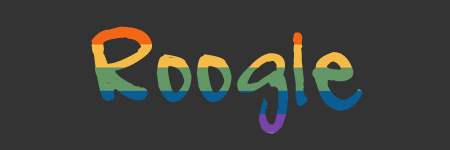
<style>
.page{position:relative;width:450px;height:150px;background:#333333}
.page>*{position:absolute;margin:0}
.t1{font:119px "Ampersand";letter-spacing:-0.019em}
</style>
<div class="page">
<p class="t1" style="left:91px;top:26px;width:272px;height:108px">Roogle</p>
</div>
